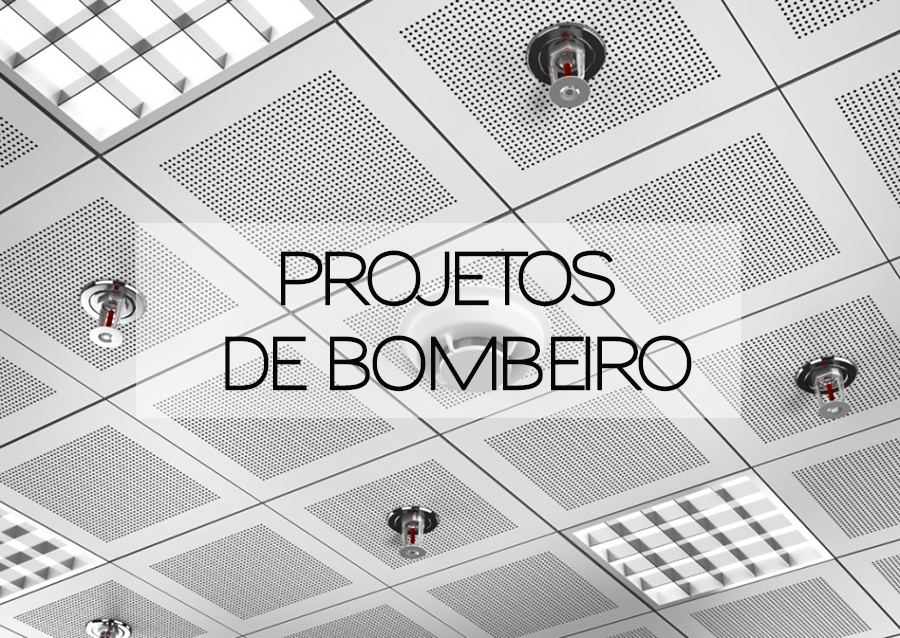
<style>
.page{position:relative;width:900px;height:638px}
.page>*{position:absolute;margin:0}
.t1{font:70.9px "Sansumi-Bold";letter-spacing:-0.05em;color:#070707;scale:0.9 1}
</style>
<div class="page">
<p class="t1" style="left:225px;top:250px;width:467px;height:142px;text-align:center">PROJETOS<br>DE BOMBEIRO</p>
</div>
